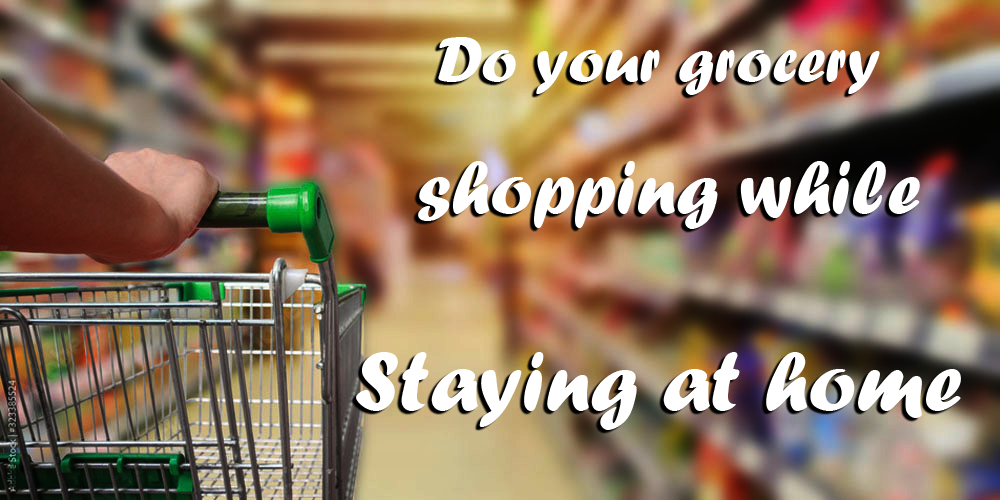
<style>
.page{position:relative;width:1000px;height:500px}
.page>*{position:absolute;margin:0}
.t1{font:66.1px "ForteMT";color:#ffffff}
.t2{font:78.1px "ForteMT";color:#ffffff}
.t3{font:88.3px "ForteMT";color:#ffffff}
</style>
<div class="page">
<p class="t1" style="left:438px;top:37px;width:442px;height:58px">Do your grocery</p>
<p class="t2" style="left:418px;top:161px;width:502px;height:68px">shopping while</p>
<p class="t3" style="left:356px;top:352px;width:605px;height:78px">Staying at home</p>
</div>
